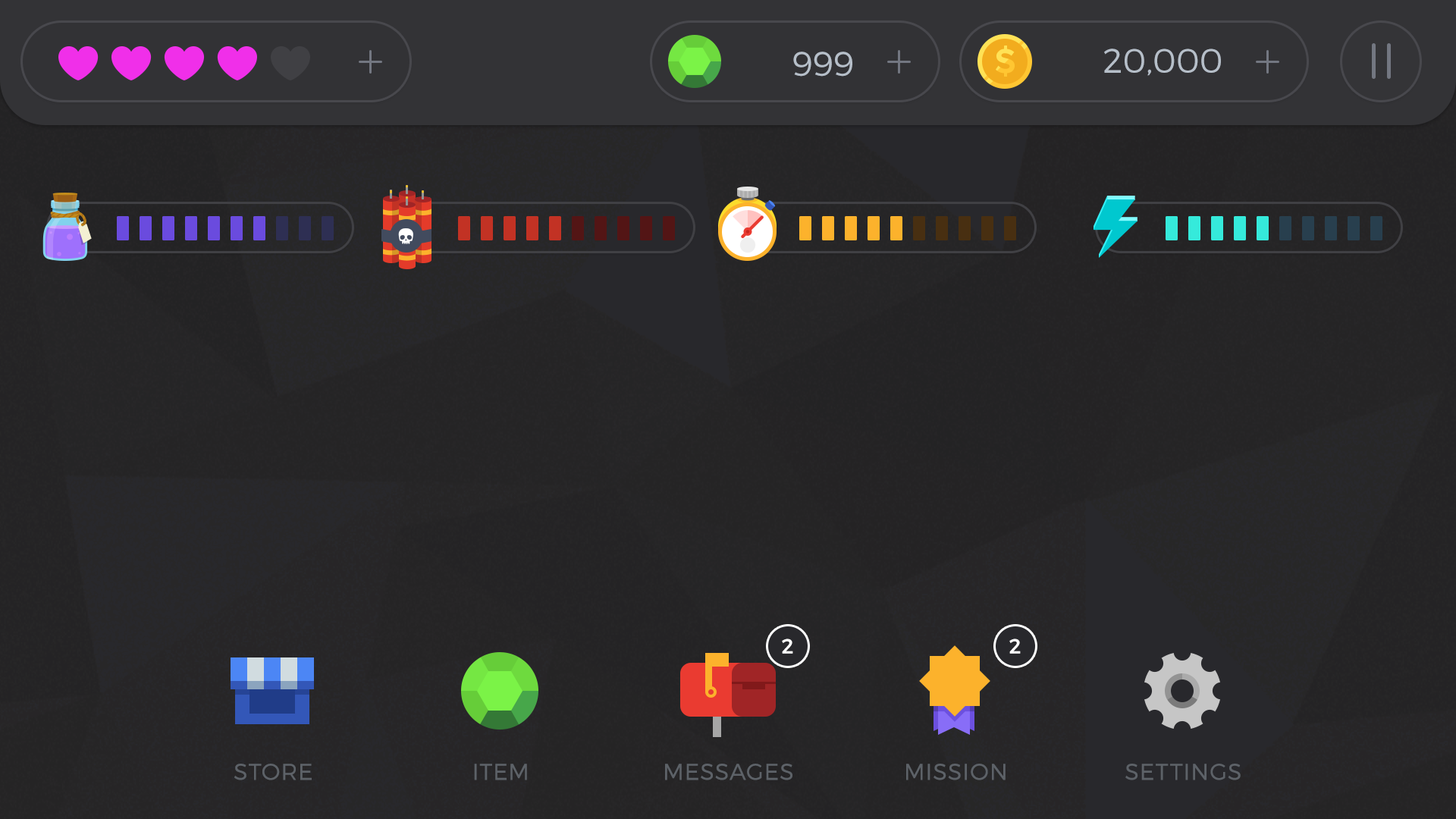
<style>
.page{position:relative;width:1456px;height:819px}
.page>*{position:absolute;margin:0}
.t1{font:34.1px "Montserrat-Light";color:#b6bfc9;text-transform:uppercase}
.t2{font:20.5px "Montserrat-Regular";letter-spacing:0.04em;color:#ffffff}
.t3{font:22.7px "Montserrat-Light";letter-spacing:0.05em;color:#5d6268;text-transform:uppercase}
</style>
<div class="page">
<p class="t1" style="left:793px;top:52px;width:59px;height:25px">999</p>
<p class="t1" style="left:1104px;top:49px;width:117px;height:27px">20,000</p>
<p class="t2" style="left:782px;top:639px;width:11px;height:15px">2</p>
<p class="t2" style="left:1009px;top:639px;width:12px;height:15px">2</p>
<p class="t3" style="left:234px;top:764px;width:78px;height:16px">store</p>
<p class="t3" style="left:474px;top:764px;width:53px;height:16px">Item</p>
<p class="t3" style="left:665px;top:764px;width:127px;height:16px">Messages</p>
<p class="t3" style="left:906px;top:764px;width:100px;height:16px">Mission</p>
<p class="t3" style="left:1125px;top:764px;width:116px;height:16px">Settings</p>
</div>
